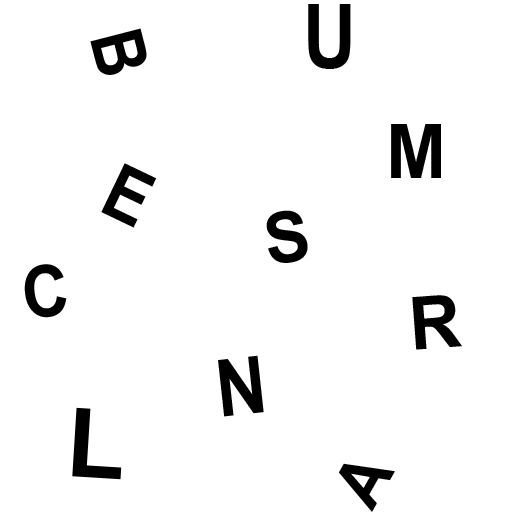
<style>
.page{position:relative;width:512px;height:512px;background:#ffffff}
.page>*{position:absolute;margin:0}
.t1{font:89.1px "ArialNarrow-Bold";color:#000000}
.t2{font:72.3px "ArialNarrow-Bold";color:#000000;scale:1.07 1}
.t3{font:74.9px "ArialNarrow-Bold";color:#000000;scale:1.18 1}
.t4{font:75.6px "ArialNarrow-Bold";color:#000000;scale:1.06 1}
.t5{font:70.6px "ArialNarrow-Bold";color:#000000;scale:1.17 1}
.t6{font:71.5px "ArialNarrow-Bold";color:#000000;scale:1.1 1}
.t7{font:73.5px "ArialNarrow-Bold";color:#000000;scale:1.19 1}
.t8{font:79.1px "ArialNarrow-Bold";color:#000000;scale:1.08 1}
.t9{font:96.4px "ArialNarrow-Bold";color:#000000;scale:1.21 1}
.t10{font:67.4px "ArialNarrow-Bold";color:#000000;scale:1.18 1}
</style>
<div class="page">
<p class="t1" style="left:308px;top:4px;width:43px;height:65px">U</p>
<p class="t2" style="left:90px;top:28px;width:57px;height:47px;rotate:76deg">B</p>
<p class="t3" style="left:391px;top:124px;width:50px;height:54px">M</p>
<p class="t4" style="left:101px;top:163px;width:56px;height:65px;rotate:26deg">E</p>
<p class="t5" style="left:266px;top:210px;width:42px;height:53px;rotate:-8deg">S</p>
<p class="t6" style="left:24px;top:264px;width:43px;height:54px;rotate:-7deg">C</p>
<p class="t7" style="left:412px;top:295px;width:50px;height:55px;rotate:-4deg">R</p>
<p class="t8" style="left:218px;top:355px;width:46px;height:62px;rotate:-6deg">N</p>
<p class="t9" style="left:72px;top:407px;width:50px;height:73px;rotate:4deg">L</p>
<p class="t10" style="left:339px;top:463px;width:56px;height:49px;rotate:-61deg">A</p>
</div>
